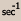
<style>
.page{position:relative;width:21px;height:21px;background:#d9cdc1}
.page>*{position:absolute;margin:0}
.t1{font:9px "Tahoma";color:#000000}
</style>
<div class="page">
<p class="t1" style="left:12px;top:2px;width:8px;height:7px">-1</p>
<p class="t1" style="left:2px;top:9px;width:13px;height:7px">sec</p>
</div>
